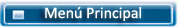
<style>
.page{position:relative;width:178px;height:27px}
.page>*{position:absolute;margin:0}
.t1{font:16px "Calibri";color:#ffffff}
</style>
<div class="page">
<p class="t1" style="left:45px;top:7px;width:96px;height:14px">Menú Principal</p>
</div>
